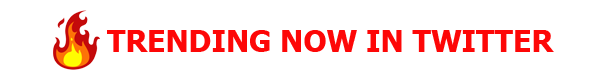
<style>
.page{position:relative;width:600px;height:80px;background:#ffffff}
.page>*{position:absolute;margin:0}
.t1{font:30px "Tahoma-Bold";color:#fd0707}
</style>
<div class="page">
<p class="t1" style="left:107px;top:30px;width:447px;height:22px">TRENDING NOW IN TWITTER</p>
</div>
